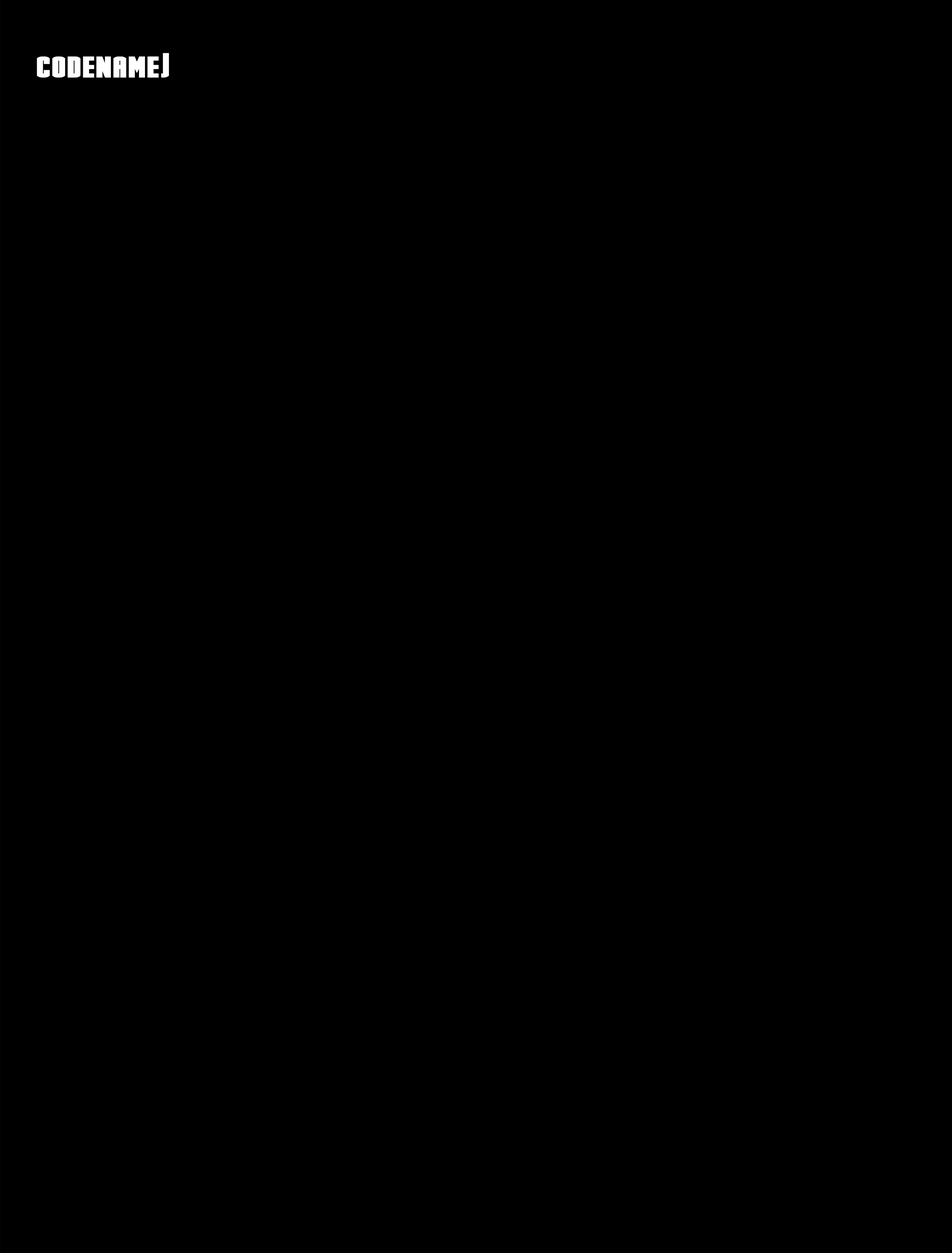
<style>
.page{position:relative;width:952px;height:1253px;background:#000000}
.page>*{position:absolute;margin:0}
.t1{font:34.8px "Stark-Bold";color:#ffffff}
</style>
<div class="page">
<p class="t1" style="left:37px;top:53px;width:132px;height:25px">codenameJ</p>
</div>
